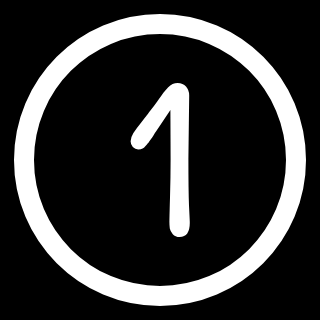
<style>
.page{position:relative;width:320px;height:320px;background:#000000}
.page>*{position:absolute;margin:0}
.t1{font:200px "DeliusUnicase-Regular";color:#ffffff}
</style>
<div class="page">
<p class="t1" style="left:130px;top:83px;width:60px;height:154px">1</p>
</div>
